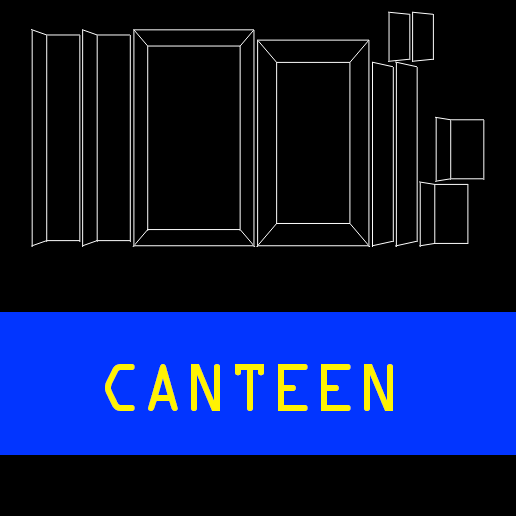
<style>
.page{position:relative;width:516px;height:516px;background:#000000}
.page>*{position:absolute;margin:0}
.t1{font:60px "OCRAStd";color:#fff203}
</style>
<div class="page">
<p class="t1" style="left:105px;top:364px;width:288px;height:47px">CANTEEN</p>
</div>
